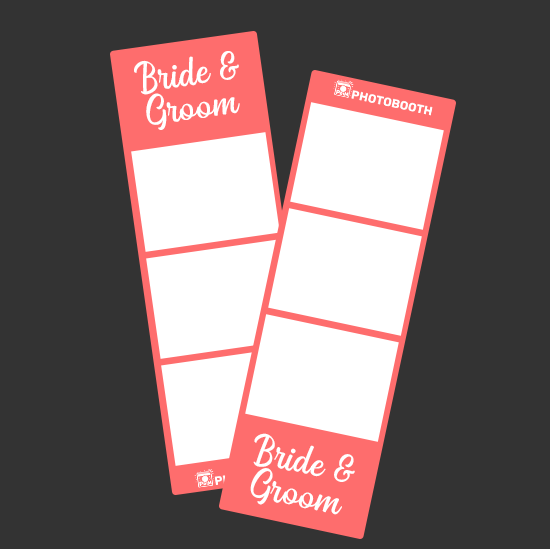
<style>
.page{position:relative;width:550px;height:549px;background:#333333}
.page>*{position:absolute;margin:0}
.t1{font:33.8px/33.8px "Bahuraksa";color:#ffffff}
</style>
<div class="page">
<p class="t1" style="left:134px;top:51px;width:106px;height:79px;text-align:center;rotate:-8deg">Bride &amp;<br>Groom</p>
<p class="t1" style="left:250px;top:433px;width:105px;height:82px;text-align:center;rotate:12deg">Bride &amp;<br>Groom</p>
</div>
